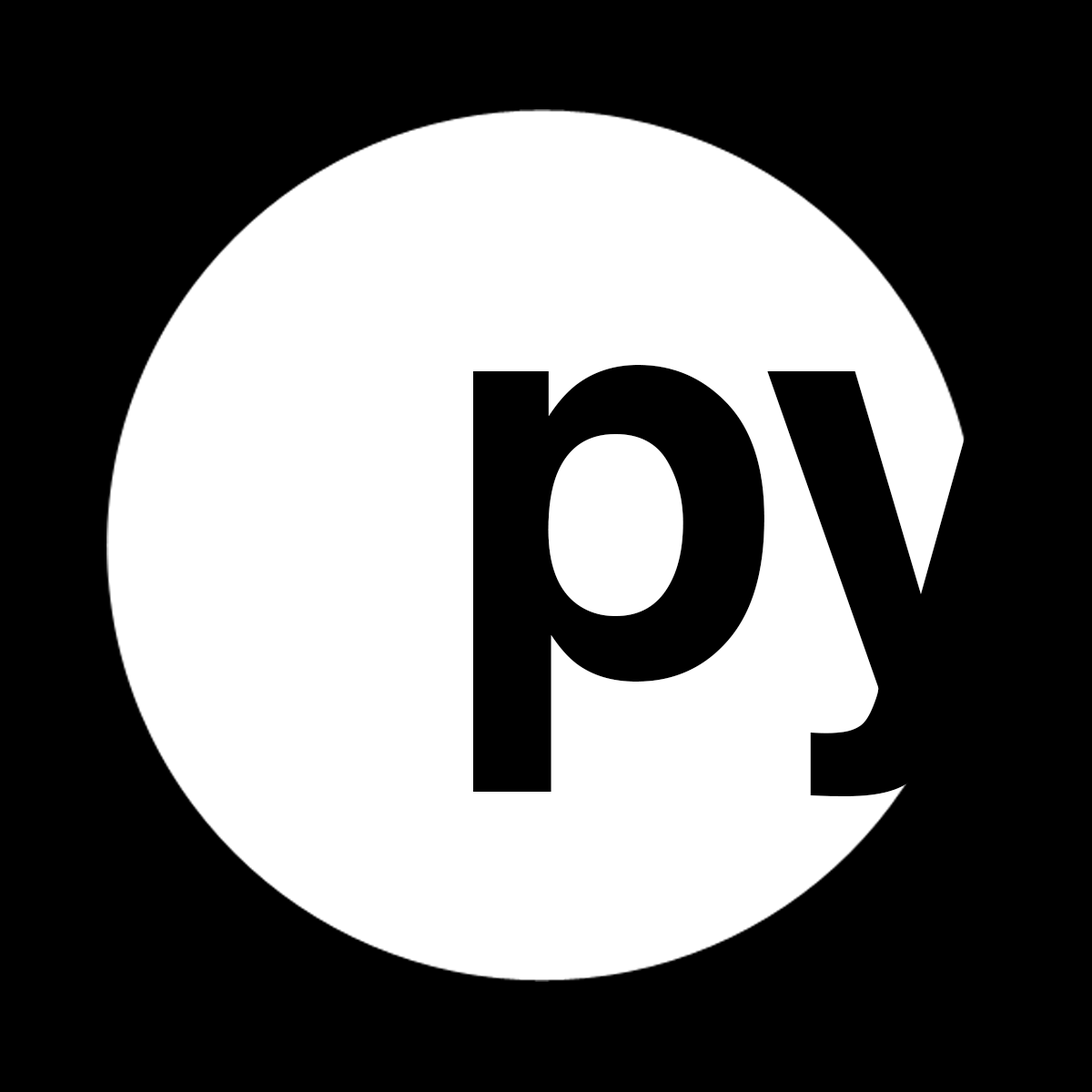
<style>
.page{position:relative;width:1092px;height:1092px;background:#000000}
.page>*{position:absolute;margin:0}
.t1{font:566.3px "Helvetica-Bold";letter-spacing:-0.04em;color:#000000}
</style>
<div class="page">
<p class="t1" style="left:473px;top:365px;width:594px;height:431px">py</p>
</div>
